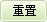
<style>
.page{position:relative;width:47px;height:22px}
.page>*{position:absolute;margin:0}
.t1{font:12px "SimSun";color:#000000}
</style>
<div class="page">
<p class="t1" style="left:13px;top:5px;width:23px;height:11px">重置</p>
</div>
